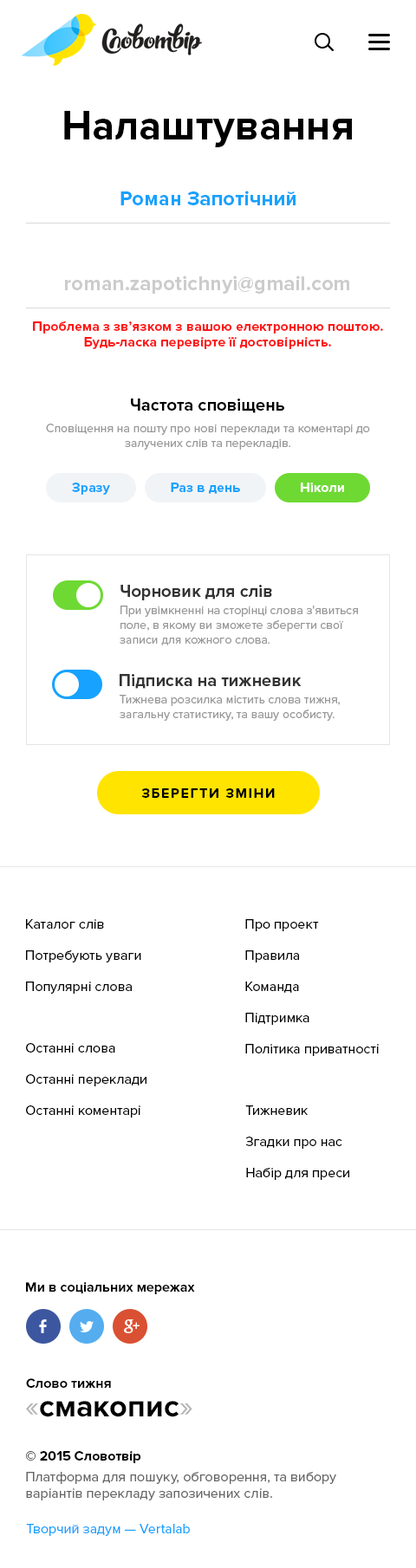
<style>
.page{position:relative;width:416px;height:1568px;background:#ffffff}
.page>*{position:absolute;margin:0}
.t1{font:41.6px "ProximaNova-Bold";color:#000000}
.t2{font:20.8px "ProximaNova-Bold";color:#17a2ff}
.t3{font:20.8px "ProximaNova-Bold";color:#cccccc}
.t4{font:13.9px/15.6px "ProximaNova-Bold";color:#ff1717}
.t5{font:17.3px "ProximaNova-Bold";color:#000000}
.t6{font:12.1px "ProximaNova-Regular";color:#999999}
.t7{font:13.9px "ProximaNova-Bold";color:#17a2ff}
.t8{font:13.9px "ProximaNova-Bold";color:#ffffff}
.t9{font:17.3px "ProximaNova-Bold";color:#333333}
.t10{font:13.9px "ProximaNova-Bold";letter-spacing:0.1em;color:#000000;text-transform:uppercase}
.t11{font:13.9px/31.2px "ProximaNova-Regular";color:#000000}
.t12{font:13.9px/31.2px "ProximaNova-Regular";color:#010101}
.t13{font:13.9px "ProximaNova-Bold";color:#010101}
.t14{font:31.2px "ProximaNova-Bold";color:#000000}
.t15{font:31.2px "ProximaNova-Regular";color:#b3b3b3}
.t16{font:13.9px "ProximaNova-Regular";color:#666666}
.t17{font:13.9px/19.1px "ProximaNova-Bold";color:#000000}
.t18{font:13.9px/20.8px "ProximaNova-Regular";color:#666666}
.t19{font:13.9px "ProximaNova-Regular";color:#17a2ff}
</style>
<div class="page">
<p class="t1" style="left:64px;top:111px;width:288px;height:36px">Налаштування</p>
<p class="t2" style="left:120px;top:191px;width:175px;height:14px">Роман Запотічний</p>
<p class="t3" style="left:65px;top:275px;width:284px;height:19px">roman.zapotichnyi@gmail.com</p>
<p class="t4" style="left:33px;top:321px;width:350px;height:28px;text-align:center">Проблема з зв’язком з вашою електронною поштою.<br>Будь-ласка перевірте її достовірність.</p>
<p class="t5" style="left:131px;top:398px;width:153px;height:15px">Частота сповіщень</p>
<p class="t6" style="left:46px;top:424px;width:324px;height:26px;text-align:center">Сповіщення на пошту про нові переклади та коментарі до<br>залучених слів та перекладів.</p>
<p class="t7" style="left:72px;top:483px;width:38px;height:12px">Зразу</p>
<p class="t7" style="left:171px;top:483px;width:69px;height:11px">Раз в день</p>
<p class="t8" style="left:301px;top:483px;width:43px;height:9px">Ніколи</p>
<p class="t9" style="left:120px;top:585px;width:152px;height:15px">Чорновик для слів</p>
<p class="t6" style="left:120px;top:606px;width:238px;height:39px">При увімкненні на сторінці слова з'явиться поле, в якому ви зможете зберегти свої<br>записи для кожного слова.</p>
<p class="t9" style="left:120px;top:674px;width:181px;height:15px">Підписка на тижневик</p>
<p class="t6" style="left:120px;top:695px;width:220px;height:26px">Тижнева розсилка містить слова тижня, загальну статистику, та вашу особисту.</p>
<p class="t10" style="left:141px;top:788px;width:134px;height:10px">Зберегти зміни</p>
<p class="t11" style="left:26px;top:919px;width:115px;height:75px">Каталог слів<br>Потребують уваги<br>Популярні слова</p>
<p class="t11" style="left:245px;top:919px;width:134px;height:137px">Про проект<br>Правила<br>Команда<br>Підтримка<br>Політика приватності</p>
<p class="t11" style="left:26px;top:1043px;width:120px;height:75px">Останні слова<br>Останні переклади<br>Останні коментарі</p>
<p class="t12" style="left:245px;top:1105px;width:104px;height:75px">Тижневик<br>Згадки про нас<br>Набір для преси</p>
<p class="t13" style="left:26px;top:1282px;width:169px;height:12px">Ми в соціальних мережах</p>
<p class="t13" style="left:26px;top:1378px;width:85px;height:10px">Слово тижня</p>
<p class="t14" style="left:26px;top:1401px;width:166px;height:16px"><span class="t15">«</span>смакопис<span class="t15">»</span></p>
<p class="t16" style="left:26px;top:1451px;width:310px;height:49px"><span class="t17">© 2015 Словотвір<br></span><span class="t18">Платформа для пошуку, обговорення, </span>та вибору<br>варіантів перекладу запозичених слів.</p>
<p class="t19" style="left:26px;top:1524px;width:164px;height:12px">Творчий задум — Vertalab</p>
</div>
